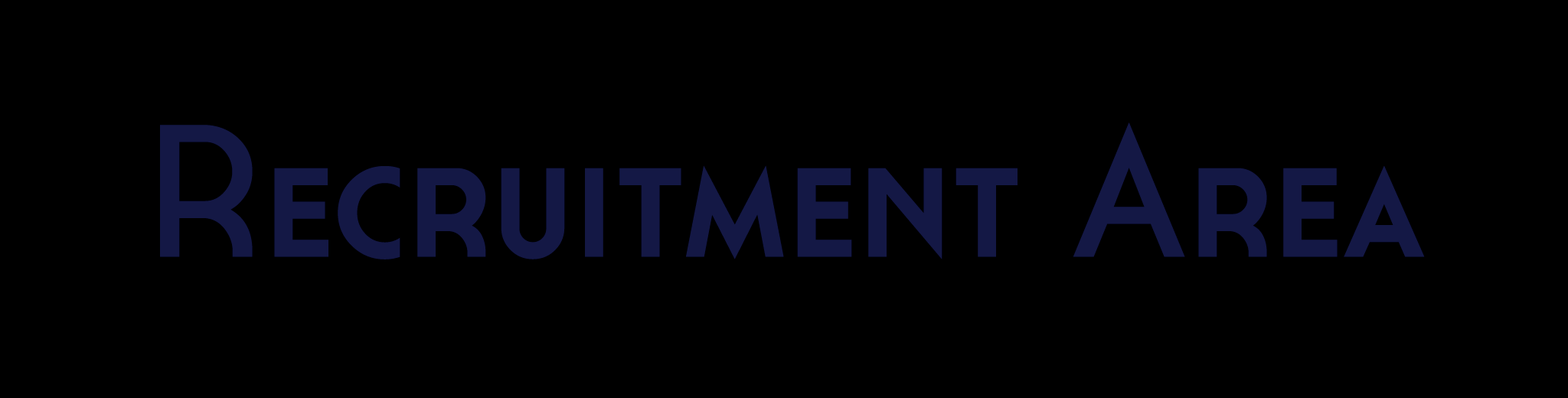
<style>
.page{position:relative;width:1568px;height:398px;background:#000000}
.page>*{position:absolute;margin:0}
.t1{font:188px "Cassannet-Regular";color:#141845}
</style>
<div class="page">
<p class="t1" style="left:160px;top:122px;width:1265px;height:138px">Recruitment Area</p>
</div>
